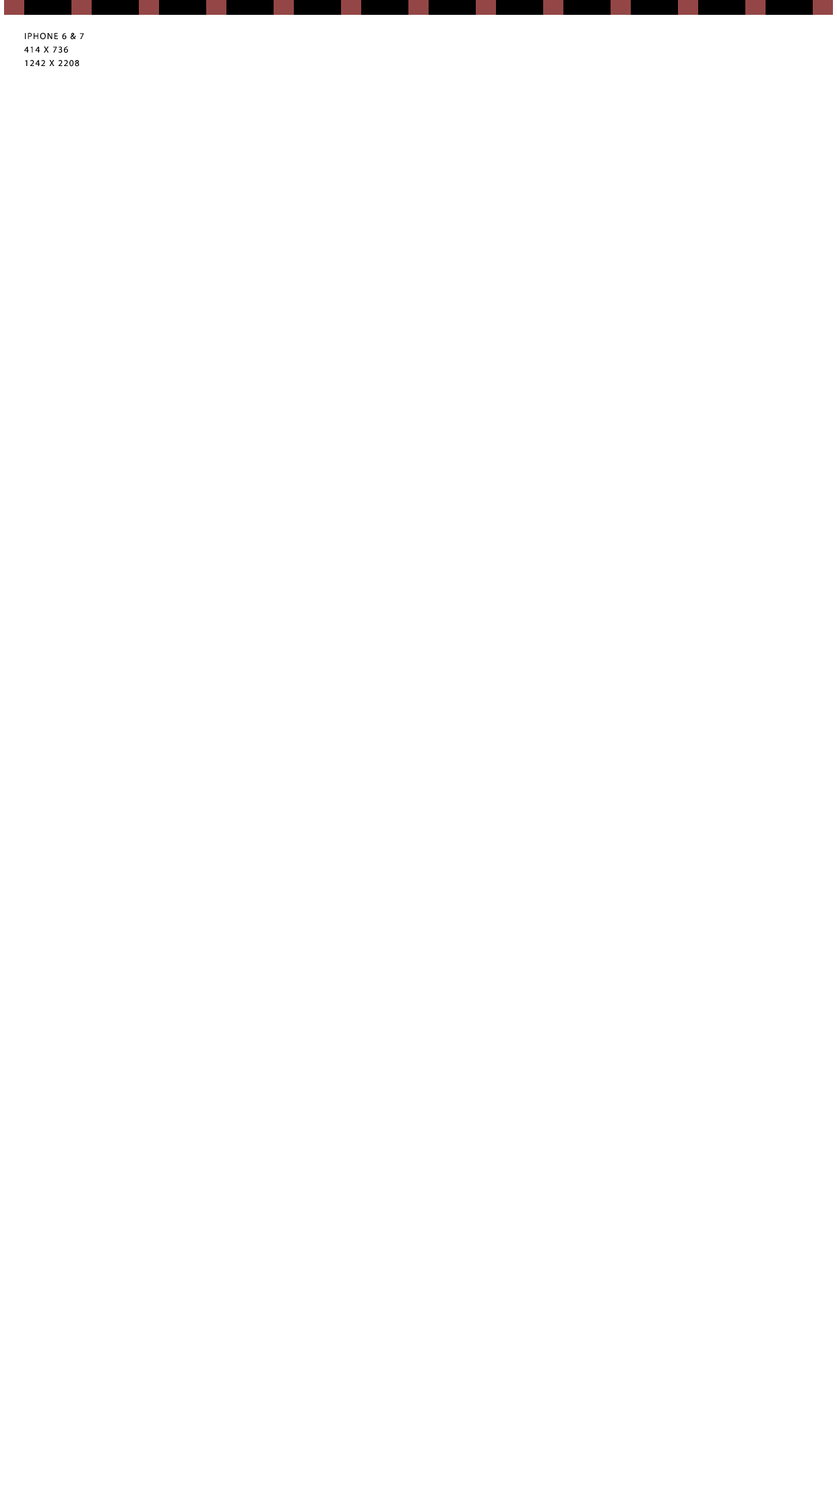
<style>
.page{position:relative;width:837px;height:1488px;background:#ffffff}
.page>*{position:absolute;margin:0}
.t1{font:9px "MyriadPro-Regular";letter-spacing:0.102em;color:#000000;text-transform:uppercase}
</style>
<div class="page">
<p class="t1" style="left:25px;top:32px;width:59px;height:8px">iPhone 6 &amp; 7</p>
<p class="t1" style="left:24px;top:47px;width:44px;height:6px">414 x 736</p>
<p class="t1" style="left:25px;top:60px;width:55px;height:7px">1242 x 2208</p>
</div>
